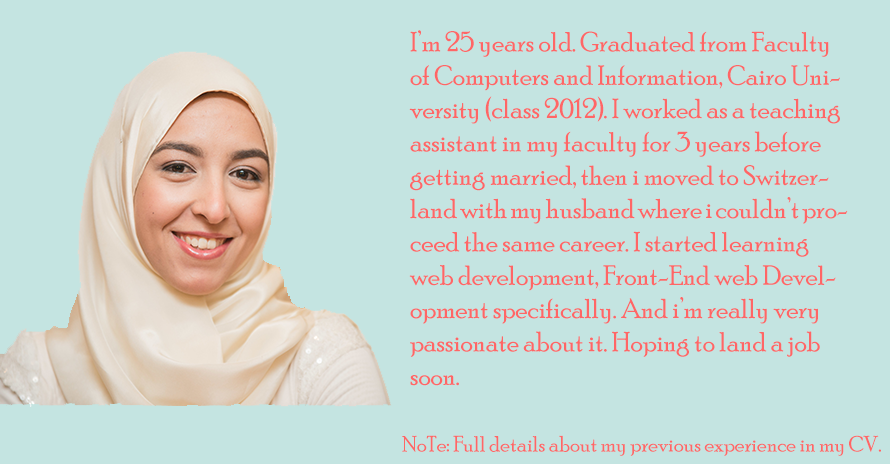
<style>
.page{position:relative;width:890px;height:464px;background:#c4e4e1}
.page>*{position:absolute;margin:0}
.t1{font:27.8px "PoorRichard-Regular";color:#ff6666}
.t2{font:22.2px "PoorRichard-Regular";color:#ff6666}
</style>
<div class="page">
<p class="t1" style="left:409px;top:30px;width:439px;height:356px">I’m 25 years old. Graduated from Faculty of Computers and Information, Cairo University (class 2012). I worked as a teaching assistant in my faculty for 3 years before getting married, then i moved to Switzerland with my husband where i couldn’t proceed the same career. I started learning web development, Front-End web Development specifically. And i’m really very passionate about it. Hoping to land a job soon.</p>
<p class="t2" style="left:402px;top:435px;width:479px;height:21px">NoTe: Full details about my previous experience in my CV.</p>
</div>
